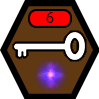
<style>
.page{position:relative;width:99px;height:99px;background:#ffffff}
.page>*{position:absolute;margin:0}
.t1{font:14.1px "KozGoPr6N-Regular";color:#000000}
</style>
<div class="page">
<p class="t1" style="left:46px;top:12px;width:8px;height:11px">6</p>
</div>
